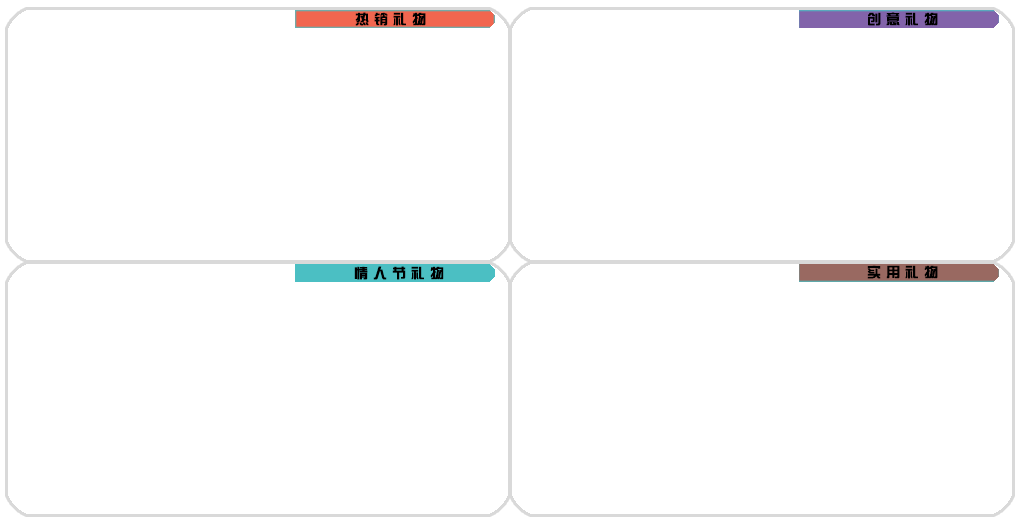
<style>
.page{position:relative;width:1024px;height:520px;background:#ffffff}
.page>*{position:absolute;margin:0}
.t1{font:14px "BDZYJT--GB1-0";letter-spacing:0.355em;color:#000000}
</style>
<div class="page">
<p class="t1" style="left:355px;top:12px;width:71px;height:14px">热销礼物</p>
<p class="t1" style="left:868px;top:12px;width:70px;height:14px">创意礼物</p>
<p class="t1" style="left:354px;top:266px;width:90px;height:14px">情人节礼物</p>
<p class="t1" style="left:867px;top:265px;width:71px;height:14px">实用礼物</p>
</div>
